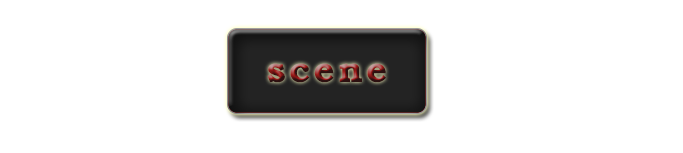
<style>
.page{position:relative;width:683px;height:153px;background:#ffffff}
.page>*{position:absolute;margin:0}
.t1{font:36px "BookmanOldStyle-Bold";letter-spacing:0.1em}
</style>
<div class="page">
<p class="t1" style="left:267px;top:63px;width:119px;height:20px">scene</p>
</div>
